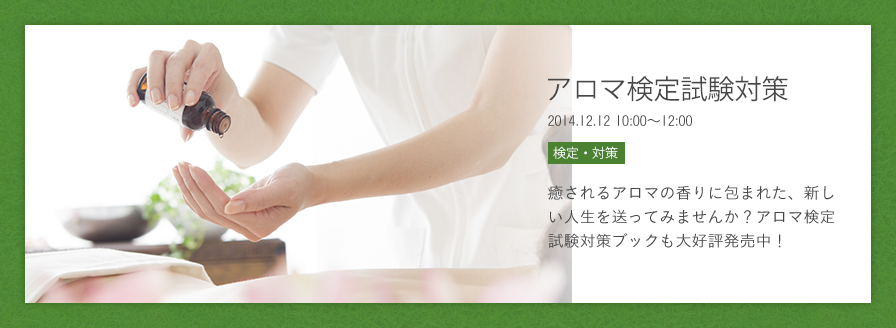
<style>
.page{position:relative;width:896px;height:328px;background:#ffffff}
.page>*{position:absolute;margin:0}
.t1{font:27px "KozGoPr6N-Regular";color:#474747}
.t2{font:14px "KoburinaGoStd-W3";color:#474747}
.t3{font:13px "KozGoPr6N-Regular";color:#ffffff}
.t4{font:16px/24px "KoburinaGoStd-W3";color:#474747}
</style>
<div class="page">
<p class="t1" style="left:548px;top:76px;width:240px;height:26px">アロマ検定試験対策</p>
<p class="t2" style="left:548px;top:115px;width:144px;height:11px">2014.12.12 10:00〜12:00</p>
<p class="t3" style="left:553px;top:146px;width:65px;height:13px">検定・対策</p>
<p class="t4" style="left:548px;top:185px;width:286px;height:63px">癒されるアロマの香りに包まれた、新しい人生を送ってみませんか？アロマ検定試験対策ブックも大好評発売中！</p>
</div>
